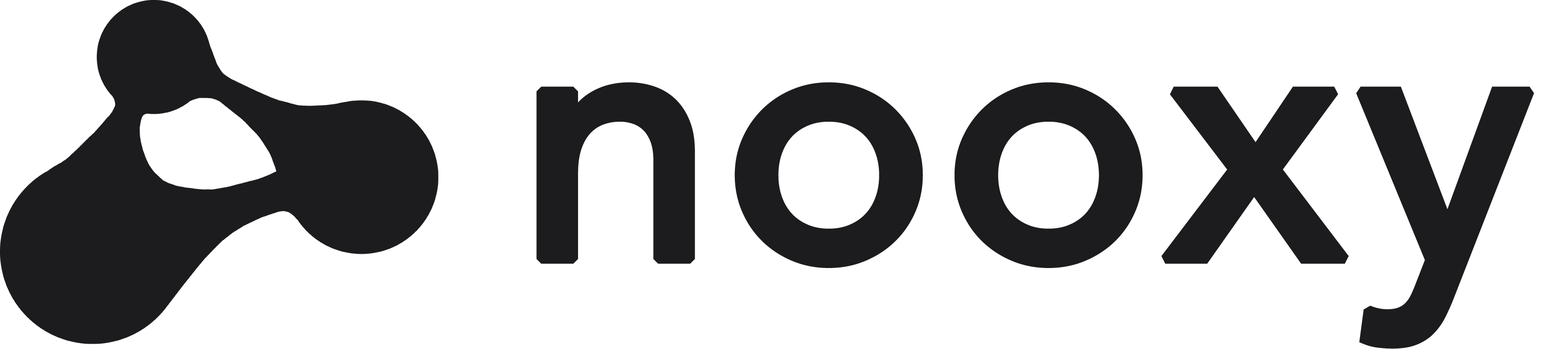
<style>
.page{position:relative;width:1568px;height:349px;background:#ffffff}
.page>*{position:absolute;margin:0}
.t1{font:353.9px "Avenir-Medium";color:#1c1c1e;font-weight:bold}
</style>
<div class="page">
<p class="t1" style="left:536px;top:82px;width:998px;height:267px">nooxy</p>
</div>
